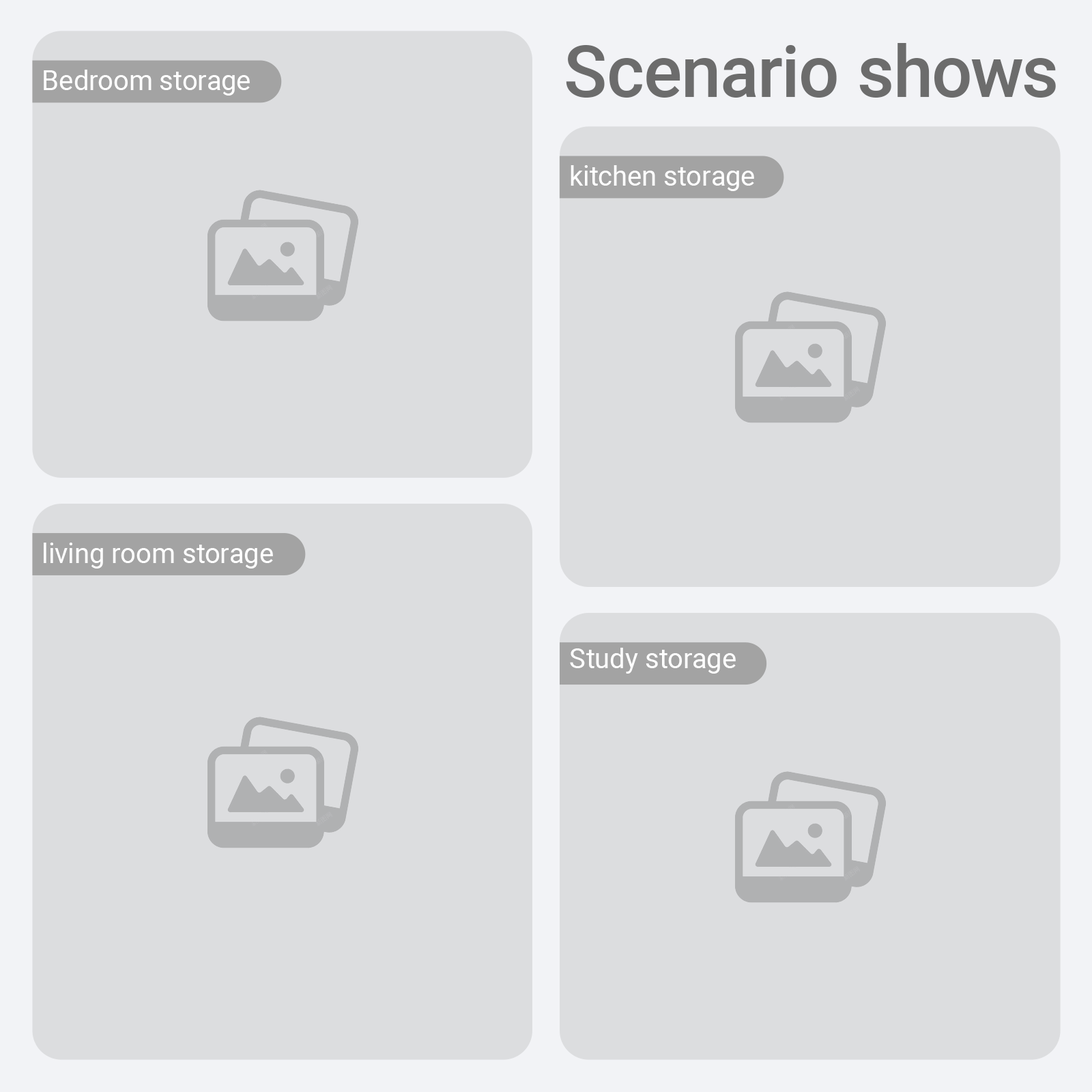
<style>
.page{position:relative;width:1092px;height:1092px;background:#dcdddf}
.page>*{position:absolute;margin:0}
.t1{font:71.3px "Roboto-Medium";color:#6c6c6c}
.t2{font:27.3px "Roboto-Regular";color:#ffffff}
</style>
<div class="page">
<p class="t1" style="left:566px;top:43px;width:490px;height:55px">Scenario shows</p>
<p class="t2" style="left:44px;top:70px;width:206px;height:26px">Bedroom storage</p>
<p class="t2" style="left:571px;top:165px;width:183px;height:26px">kitchen storage</p>
<p class="t2" style="left:44px;top:543px;width:229px;height:26px">living room storage</p>
<p class="t2" style="left:570px;top:648px;width:166px;height:26px">Study storage</p>
</div>
